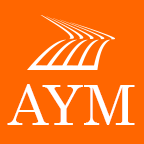
<style>
.page{position:relative;width:144px;height:144px;background:#ff6600}
.page>*{position:absolute;margin:0}
.t1{font:56.2px "Century";color:#ffffff}
</style>
<div class="page">
<p class="t1" style="left:7px;top:84px;width:128px;height:41px">AYM</p>
</div>
